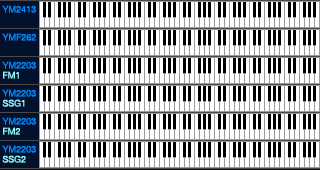
<style>
.page{position:relative;width:320px;height:170px;background:#ffffff}
.page>*{position:absolute;margin:0}
.t1{font:9px "HelveticaNeueLTPro-Roman";color:#008aff}
.t2{font:9px/10px "HelveticaNeueLTPro-Roman";color:#008aff}
.t3{font:9px/10px "HelveticaNeueLTPro-Roman";color:#90f8ff}
</style>
<div class="page">
<p class="t1" style="left:2px;top:5px;width:34px;height:8px">YM2413</p>
<p class="t1" style="left:2px;top:33px;width:34px;height:8px">YMF262</p>
<p class="t2" style="left:2px;top:61px;width:34px;height:18px">YM2203<br><span class="t3">FM1</span></p>
<p class="t2" style="left:2px;top:89px;width:34px;height:18px">YM2203<br><span class="t3">SSG1</span></p>
<p class="t2" style="left:2px;top:117px;width:34px;height:18px">YM2203<br><span class="t3">FM2</span></p>
<p class="t2" style="left:2px;top:145px;width:34px;height:18px">YM2203<br><span class="t3">SSG2</span></p>
</div>
